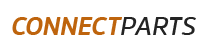
<style>
.page{position:relative;width:204px;height:50px;background:#ffffff}
.page>*{position:absolute;margin:0}
.t1{font:24.5px "AmsiPro-BoldItalic";color:#be640d}
.t2{font:24.5px "AmsiPro-SemiBoldItalic";color:#232323}
</style>
<div class="page">
<p class="t1" style="left:12px;top:17px;width:184px;height:18px">CONNECT<span class="t2">PARTS</span></p>
</div>
